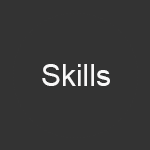
<style>
.page{position:relative;width:150px;height:150px;background:#333333}
.page>*{position:absolute;margin:0}
.t1{font:30px "ArialMT";color:#f9f8f8}
</style>
<div class="page">
<p class="t1" style="left:42px;top:64px;width:68px;height:22px">Skills</p>
</div>
